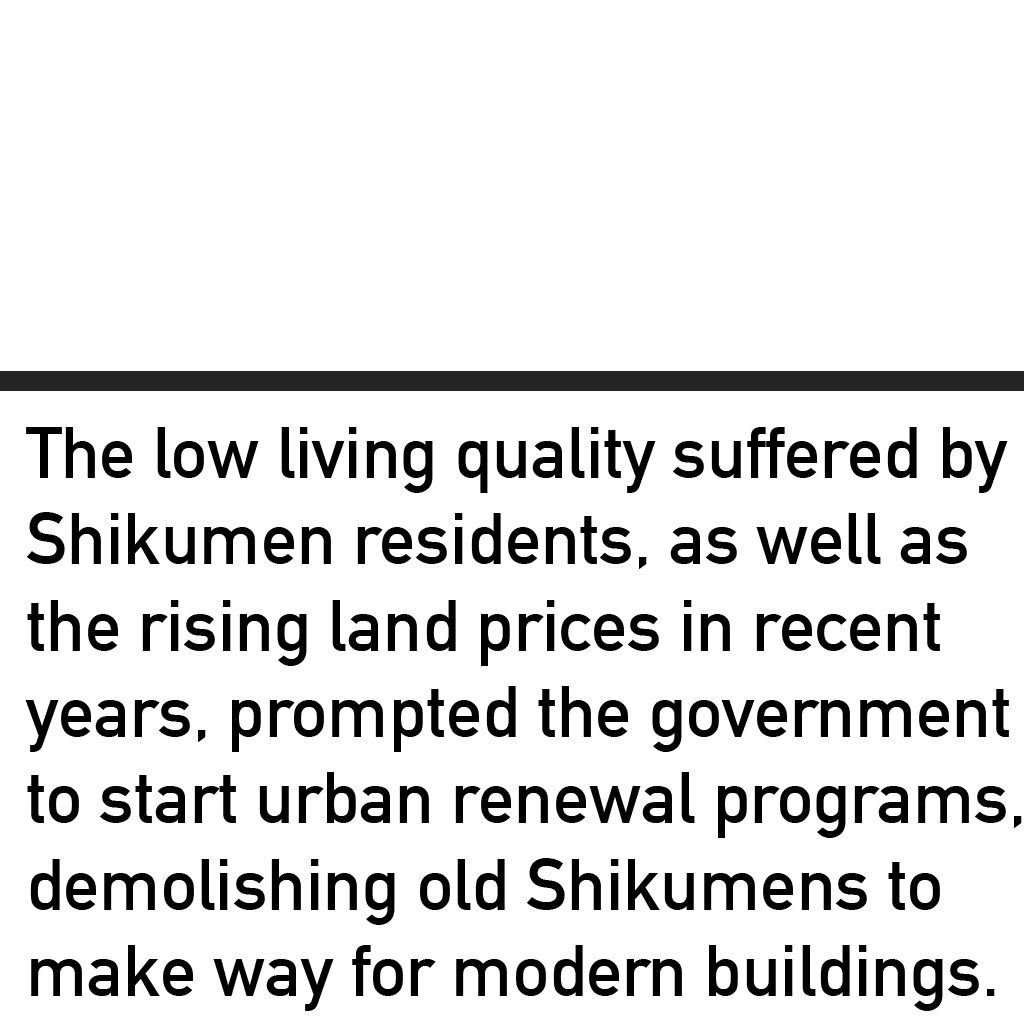
<style>
.page{position:relative;width:1024px;height:1024px;background:#ffffff}
.page>*{position:absolute;margin:0}
.t1{font:72px "DINAlternate-Bold";color:#000000}
</style>
<div class="page">
<p class="t1" style="left:25px;top:427px;width:997px;height:584px">The low living quality suffered by<br>Shikumen residents, as well as<br>the rising land prices in recent <br>years, prompted the government<br>to start urban renewal programs,<br>demolishing old Shikumens to <br>make way for modern buildings.</p>
</div>
